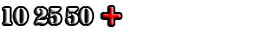
<style>
.page{position:relative;width:265px;height:32px;background:#ffffff}
.page>*{position:absolute;margin:0}
.t1{font:24px "Stencil"}
.t2{font:36px "Stencil"}
</style>
<div class="page">
<p class="t1" style="left:3px;top:8px;width:25px;height:16px">10</p>
<p class="t1" style="left:35px;top:8px;width:26px;height:16px">25</p>
<p class="t1" style="left:66px;top:8px;width:27px;height:16px">50</p>
<p class="t2" style="left:102px;top:7px;width:19px;height:18px">+</p>
</div>
